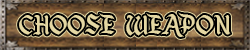
<style>
.page{position:relative;width:250px;height:50px}
.page>*{position:absolute;margin:0}
.t1{font:31.3px "EnchantedLand";color:#e4d7a3;scale:0.96 1}
</style>
<div class="page">
<p class="t1" style="left:19px;top:12px;width:212px;height:25px">CHOOSE    WEAPON</p>
<p class="t1" style="left:19px;top:12px;width:212px;height:25px">CHOOSE    WEAPON</p>
</div>
